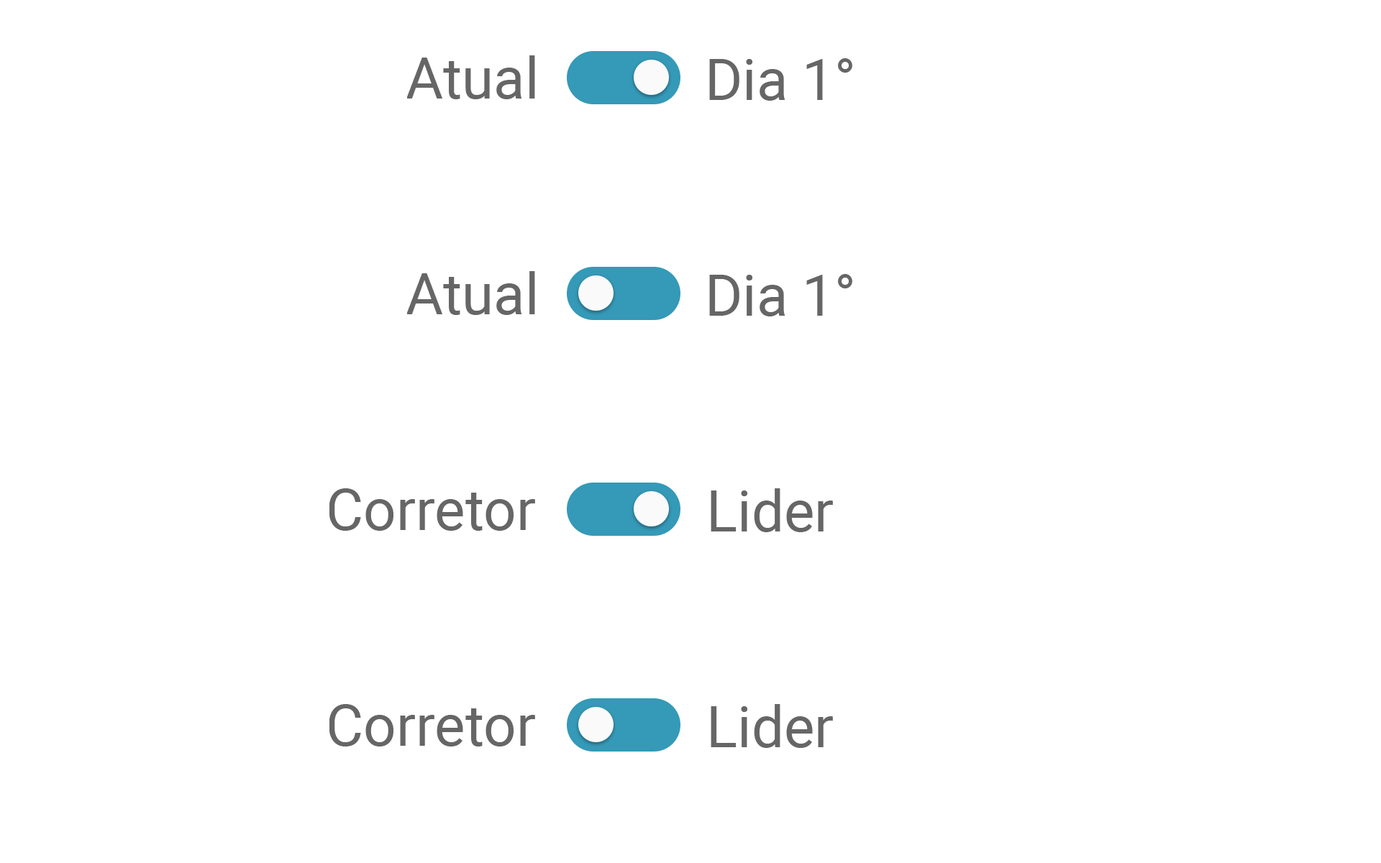
<style>
.page{position:relative;width:1381px;height:863px;background:#ffffff}
.page>*{position:absolute;margin:0}
.t1{font:57.6px "Roboto-Regular";color:#666666}
</style>
<div class="page">
<p class="t1" style="left:406px;top:55px;width:129px;height:44px">Atual</p>
<p class="t1" style="left:709px;top:58px;width:143px;height:43px">Dia 1°</p>
<p class="t1" style="left:406px;top:271px;width:129px;height:44px">Atual</p>
<p class="t1" style="left:709px;top:274px;width:143px;height:43px">Dia 1°</p>
<p class="t1" style="left:329px;top:488px;width:206px;height:43px">Corretor</p>
<p class="t1" style="left:711px;top:488px;width:122px;height:44px">Lider</p>
<p class="t1" style="left:329px;top:704px;width:206px;height:43px">Corretor</p>
<p class="t1" style="left:711px;top:704px;width:122px;height:44px">Lider</p>
</div>
